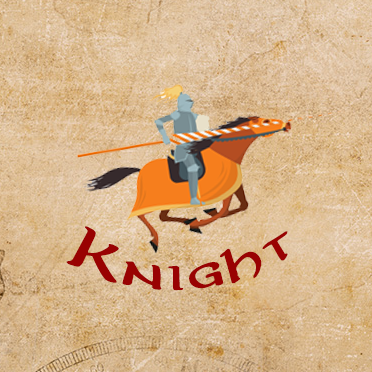
<style>
.page{position:relative;width:372px;height:372px}
.page>*{position:absolute;margin:0}
.t1{font:37.5px "Aniron-Bold";color:#990202}
</style>
<div class="page">
<p class="t1" style="left:66px;top:226px;width:222px;height:65px;rotate:-4deg">Knight</p>
</div>
